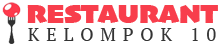
<style>
.page{position:relative;width:223px;height:47px;background:#ffffff}
.page>*{position:absolute;margin:0}
.t1{font:27px "Skia-Black";color:#f83e4c}
.t2{font:18px "PTSerif-Regular";letter-spacing:0.38em;color:#343434}
</style>
<div class="page">
<p class="t1" style="left:27px;top:5px;width:191px;height:18px">RESTAURANT</p>
<p class="t2" style="left:28px;top:28px;width:188px;height:13px">KELOMPOK 10</p>
</div>
